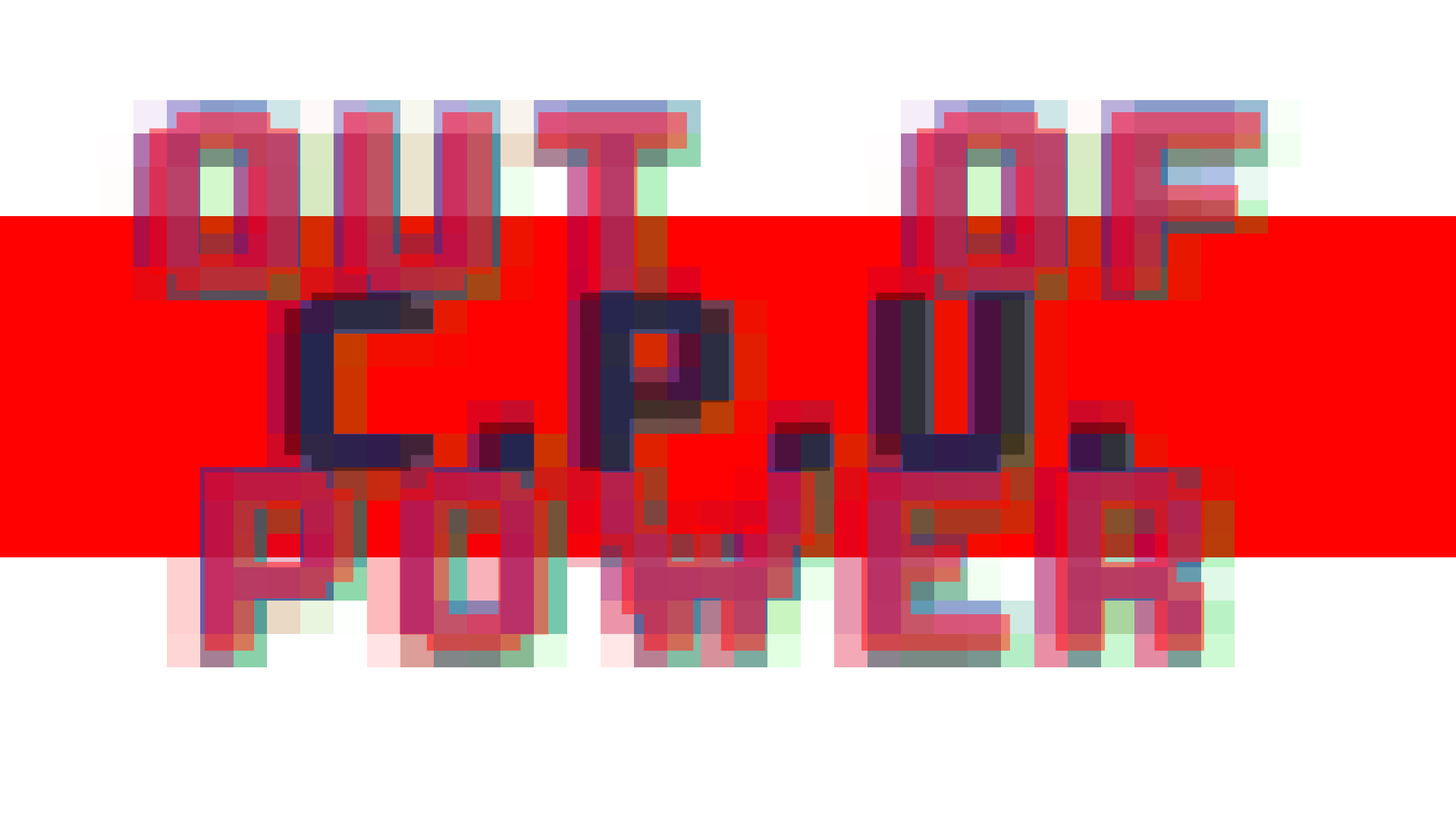
<style>
.page{position:relative;width:1456px;height:819px;background:#ffffff}
.page>*{position:absolute;margin:0}
.t1{font:270.2px/179.9px "Silom-Bold";scale:1.36 1}
</style>
<div class="page">
<p class="t1" style="left:149px;top:112px;width:1111px;height:539px;text-align:center">OUT OF<br>C.P.U.<br>POWER</p>
</div>
